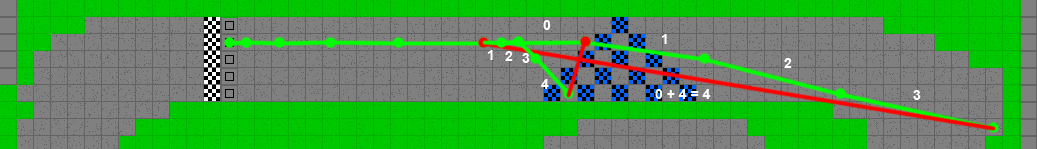
<style>
.page{position:relative;width:1037px;height:149px;background:#808080}
.page>*{position:absolute;margin:0}
.t1{font:14px "Arial-BoldMT";color:#ffffff}
</style>
<div class="page">
<p class="t1" style="left:543px;top:20px;width:8px;height:10px">0</p>
<p class="t1" style="left:662px;top:34px;width:5px;height:10px">1</p>
<p class="t1" style="left:488px;top:50px;width:5px;height:10px">1</p>
<p class="t1" style="left:505px;top:51px;width:8px;height:10px">2</p>
<p class="t1" style="left:522px;top:53px;width:8px;height:10px">3</p>
<p class="t1" style="left:784px;top:58px;width:8px;height:10px">2</p>
<p class="t1" style="left:541px;top:79px;width:8px;height:10px">4</p>
<p class="t1" style="left:655px;top:89px;width:56px;height:10px">0 + 4 = 4</p>
<p class="t1" style="left:913px;top:90px;width:8px;height:10px">3</p>
</div>
